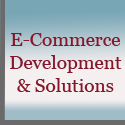
<style>
.page{position:relative;width:125px;height:125px}
.page>*{position:absolute;margin:0}
.t1{font:19px "Georgia";color:#86162b}
</style>
<div class="page">
<p class="t1" style="left:10px;top:33px;width:112px;height:59px;text-align:center">E-Commerce<br>Development<br>&amp; Solutions</p>
</div>
